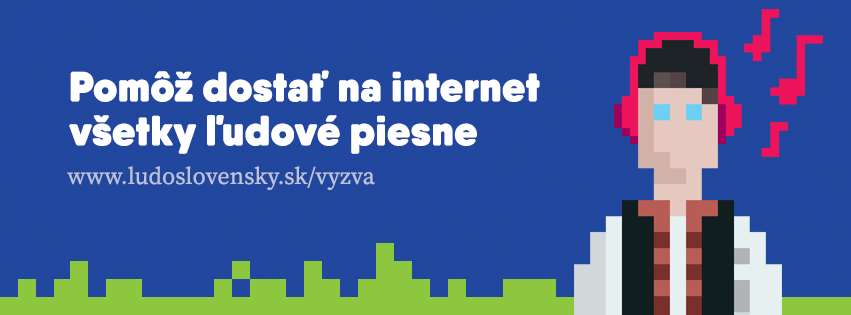
<style>
.page{position:relative;width:851px;height:315px;background:#22479e}
.page>*{position:absolute;margin:0}
.t1{font:42px/44px "QanelasSoft-Heavy";letter-spacing:0.01em;color:#ffffff}
.t2{font:24px "SourceSerifPro-Regular";color:#bcc3db}
</style>
<div class="page">
<p class="t1" style="left:69px;top:70px;width:471px;height:84px">Pomôž dostať na internet <br>všetky ľudové piesne</p>
<p class="t2" style="left:67px;top:166px;width:308px;height:24px">www.ludoslovensky.sk/vyzva</p>
</div>
